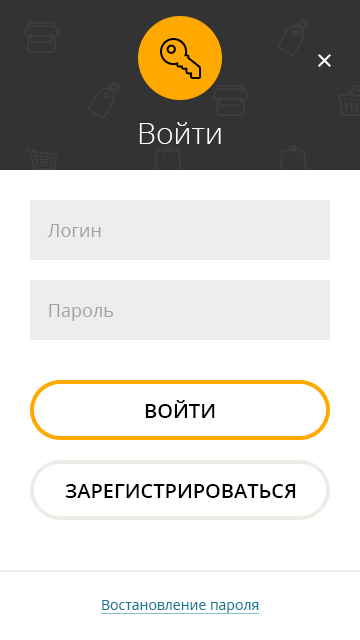
<style>
.page{position:relative;width:360px;height:640px;background:#ffffff}
.page>*{position:absolute;margin:0}
.t1{font:30px "OpenSans-Light";color:#ffffff}
.t2{font:18px "OpenSans";color:#a1a1a1}
.t3{font:20px "OpenSans-Semibold";color:#000000;text-transform:uppercase}
.t4{font:14px "OpenSans";color:#177a93}
</style>
<div class="page">
<p class="t1" style="left:139px;top:122px;width:82px;height:22px">Войти</p>
<p class="t2" style="left:47px;top:224px;width:54px;height:13px">Логин</p>
<p class="t2" style="left:49px;top:304px;width:64px;height:17px">Пароль</p>
<p class="t3" style="left:145px;top:400px;width:70px;height:18px">войти</p>
<p class="t3" style="left:65px;top:484px;width:231px;height:14px">зарегистрироваться</p>
<p class="t4" style="left:102px;top:600px;width:157px;height:13px">Востановление пароля</p>
</div>
